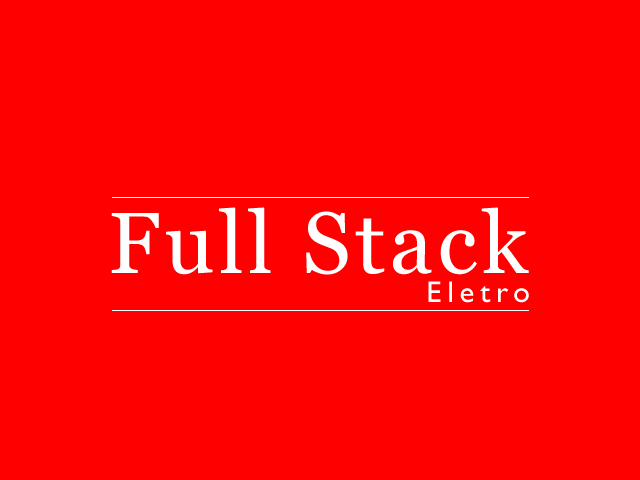
<style>
.page{position:relative;width:640px;height:480px;background:#ff0000}
.page>*{position:absolute;margin:0}
.t1{font:86.8px "Georgia";letter-spacing:0.05em;color:#ffffff}
.t2{font:30px "GillSansMT";letter-spacing:0.2em;color:#ffffff}
</style>
<div class="page">
<p class="t1" style="left:111px;top:207px;width:418px;height:68px">Full Stack</p>
<p class="t2" style="left:428px;top:281px;width:101px;height:22px">Eletro</p>
</div>
